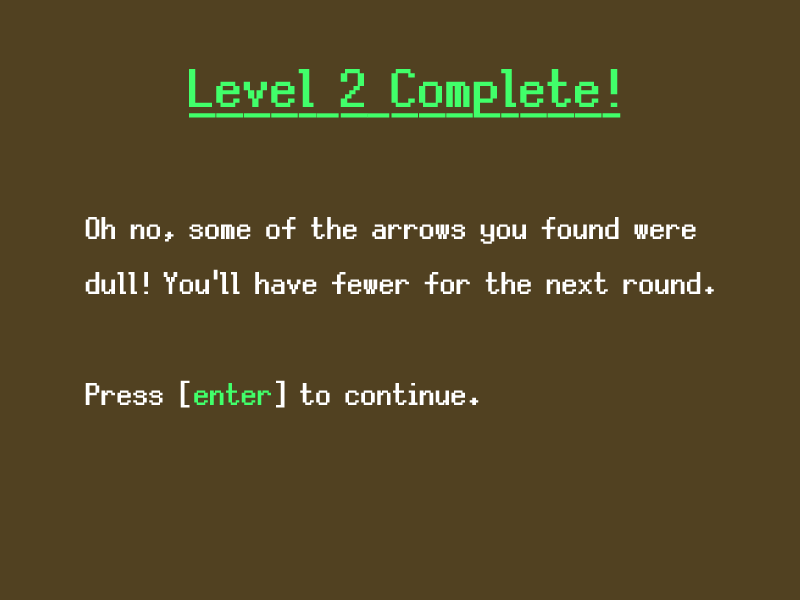
<style>
.page{position:relative;width:800px;height:600px;background:#514121}
.page>*{position:absolute;margin:0}
.t1{font:80px "Silver";color:#41ff6a;font-weight:bold;text-decoration:underline}
.t2{font:46.2px "Silver";color:#ffffff;font-weight:bold}
.t3{font:46.2px "Silver";color:#41ff6a;font-weight:bold}
</style>
<div class="page">
<p class="t1" style="left:188px;top:69px;width:433px;height:49px">Level 2 Complete!</p>
<p class="t2" style="left:85px;top:217px;width:629px;height:191px">Oh no, some of the arrows you found were<br>dull! You'll have fewer for the next round.<br><br>Press [<span class="t3">enter</span>] to continue.</p>
</div>
